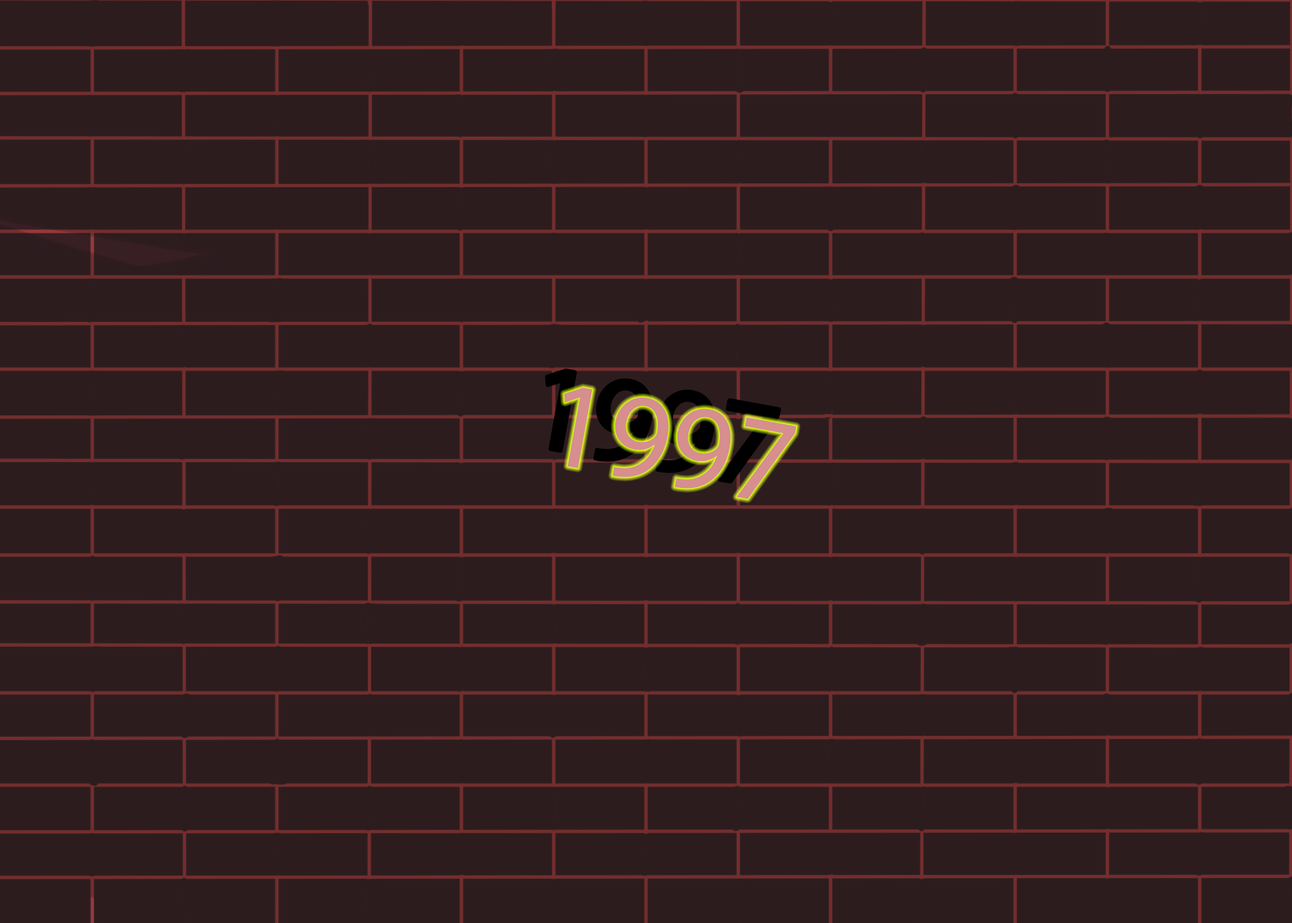
<style>
.page{position:relative;width:1292px;height:923px;background:#2d1c1e}
.page>*{position:absolute;margin:0}
.t1{font:123.1px "MyriadPro-Regular";color:#d78e8e}
</style>
<div class="page">
<p class="t1" style="left:564px;top:388px;width:233px;height:111px;rotate:10deg">1997</p>
</div>
